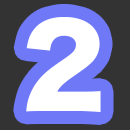
<style>
.page{position:relative;width:130px;height:130px;background:#333333}
.page>*{position:absolute;margin:0}
.t1{font:110.5px "HiraKakuStdN-W8";color:#ffffff}
</style>
<div class="page">
<p class="t1" style="left:26px;top:17px;width:75px;height:95px">２</p>
</div>
